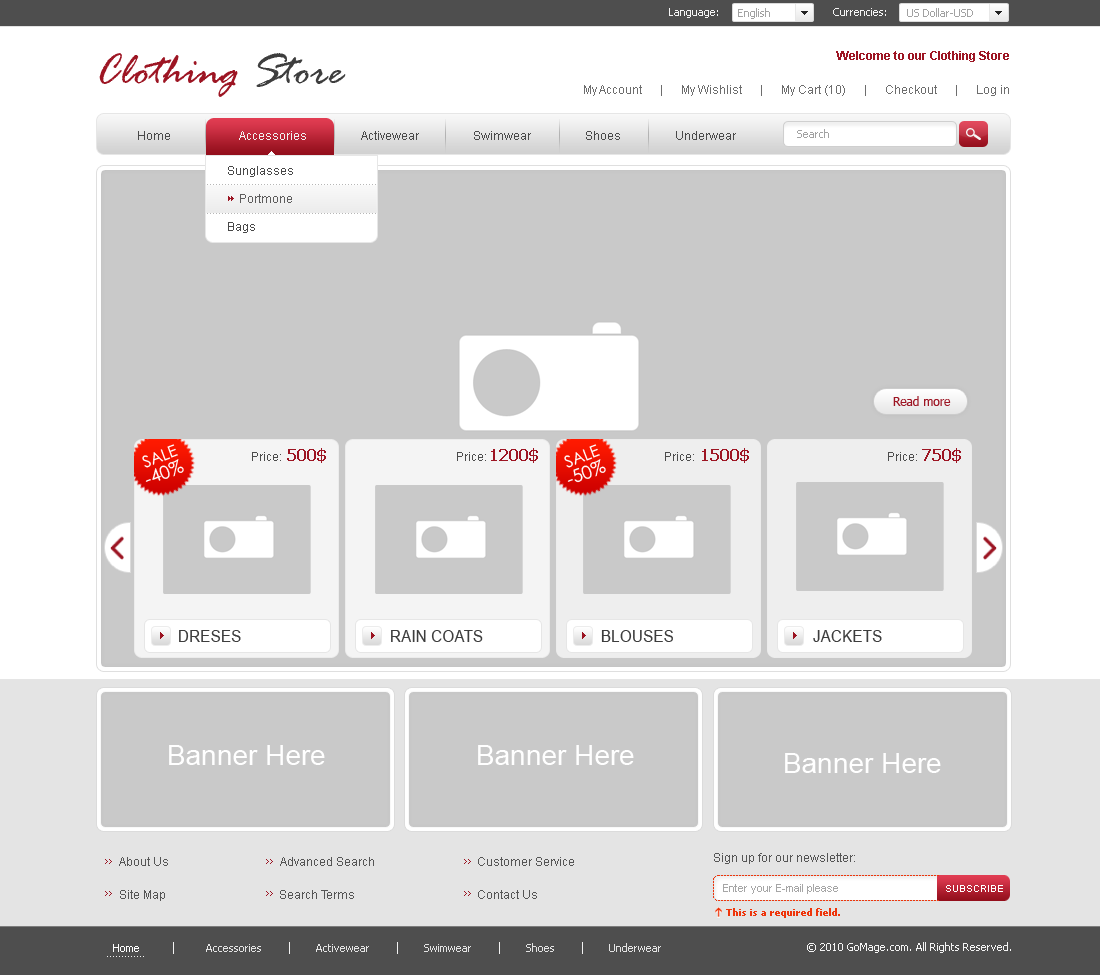
<style>
.page{position:relative;width:1100px;height:975px;background:#c9c9c9}
.page>*{position:absolute;margin:0}
.t1{font:11px "Tahoma";color:#f4f4f4}
.t2{font:11px "Tahoma";color:#a2a2a2}
.t3{font:47px "RageItalic";color:#9d1523}
.t4{font:47px "RageItalic";color:#3e3e3e}
.t5{font:12px "Arial-BoldMT";color:#9d1523}
.t6{font:12px "ArialMT";color:#6d6d6d}
.t7{font:12px "ArialMT";color:#4a4a4a}
.t8{font:12px "ArialMT";color:#f1f1f1}
.t9{font:12px/28px "ArialMT";color:#484848}
.t10{font:12px/28px "ArialMT";color:#5e5d5d}
.t11{font:12px "ArialMT";color:#b6b6b6}
.t12{font:12px "Tahoma";color:#9d1523}
.t13{font:16px "CenturyGothic";color:#ffffff}
.t14{font:16px "Tahoma-Bold";color:#9d1523}
.t15{font:18px "CenturyGothic";color:#ffffff}
.t16{font:12px "ArialMT";color:#4c4c4c}
.t17{font:17px "ArialMT";color:#3d3d3d;text-transform:uppercase;scale:0.91 1}
.t18{font:28px "ArialMT";color:#ffffff}
.t19{font:12px "ArialMT";color:#565656}
.t20{font:12px "ArialMT";color:#555555}
.t21{font:11px "ArialMT";color:#a6a6a6}
.t22{font:10px "ArialMT";color:#ffffff;text-transform:uppercase}
.t23{font:10px "Tahoma-Bold";color:#ee350b}
.t24{font:11px "Tahoma";color:#e3e3e3}
.t25{font:11px "Tahoma";color:#ffffff}
.t26{font:11px "ArialMT";color:#f2f2f2}
</style>
<div class="page">
<p class="t1" style="left:669px;top:8px;width:49px;height:10px">Language:</p>
<p class="t2" style="left:738px;top:8px;width:32px;height:11px">English</p>
<p class="t1" style="left:833px;top:8px;width:53px;height:8px">Currencies:</p>
<p class="t2" style="left:907px;top:8px;width:66px;height:9px">US Dollar-USD</p>
<p class="t3" style="left:99px;top:53px;width:247px;height:44px">Clothing <span class="t4">Store</span></p>
<p class="t5" style="left:836px;top:51px;width:173px;height:11px">Welcome to our Clothing Store</p>
<p class="t6" style="left:584px;top:85px;width:425px;height:11px">My Account      |      My Wishlist      |      My Cart (10)      |      Checkout      |      Log in</p>
<p class="t7" style="left:138px;top:131px;width:598px;height:9px">Home                     <span class="t8">  Accessories  </span>                Activewear                  Swimwear                  Shoes                  Underwear</p>
<p class="t2" style="left:797px;top:129px;width:32px;height:9px">Search</p>
<p class="t9" style="left:228px;top:166px;width:65px;height:67px">Sunglasses<br><span class="t10">    Portmone<br></span>Bags</p>
<p class="t11" style="left:207px;top:184px;width:169px;height:1px">.........................................................</p>
<p class="t11" style="left:207px;top:213px;width:169px;height:1px">.........................................................</p>
<p class="t12" style="left:893px;top:396px;width:58px;height:10px">Read more</p>
<p class="t13" style="left:142px;top:444px;width:36px;height:24px;rotate:-21deg">SALE</p>
<p class="t14" style="left:287px;top:448px;width:39px;height:15px">500$</p>
<p class="t14" style="left:491px;top:448px;width:47px;height:15px">1200$</p>
<p class="t13" style="left:564px;top:444px;width:36px;height:24px;rotate:-21deg">SALE</p>
<p class="t14" style="left:702px;top:448px;width:47px;height:15px">1500$</p>
<p class="t14" style="left:922px;top:448px;width:39px;height:15px">750$</p>
<p class="t15" style="left:145px;top:459px;width:39px;height:23px;rotate:-21deg">-40%</p>
<p class="t16" style="left:252px;top:452px;width:29px;height:9px">Price:</p>
<p class="t16" style="left:457px;top:452px;width:29px;height:9px">Price:</p>
<p class="t15" style="left:567px;top:459px;width:39px;height:24px;rotate:-21deg">-50%</p>
<p class="t16" style="left:665px;top:452px;width:29px;height:9px">Price:</p>
<p class="t16" style="left:888px;top:452px;width:29px;height:9px">Price:</p>
<p class="t17" style="left:179px;top:630px;width:62px;height:12px">Dreses</p>
<p class="t17" style="left:391px;top:630px;width:92px;height:12px">Rain Coats</p>
<p class="t17" style="left:601px;top:630px;width:72px;height:12px">Blouses</p>
<p class="t17" style="left:813px;top:630px;width:69px;height:12px">JAckets</p>
<p class="t18" style="left:169px;top:745px;width:156px;height:20px">Banner Here</p>
<p class="t18" style="left:478px;top:745px;width:156px;height:20px">Banner Here</p>
<p class="t18" style="left:785px;top:753px;width:156px;height:20px">Banner Here</p>
<p class="t19" style="left:119px;top:857px;width:49px;height:9px">About Us</p>
<p class="t20" style="left:280px;top:857px;width:94px;height:9px">Advanced Search</p>
<p class="t20" style="left:478px;top:857px;width:96px;height:9px">Customer Service</p>
<p class="t20" style="left:714px;top:853px;width:141px;height:11px">Sign up for our newsletter:</p>
<p class="t20" style="left:120px;top:890px;width:45px;height:11px">Site Map</p>
<p class="t20" style="left:280px;top:890px;width:74px;height:9px">Search Terms</p>
<p class="t20" style="left:478px;top:890px;width:59px;height:9px">Contact Us</p>
<p class="t21" style="left:723px;top:884px;width:115px;height:10px">Enter your E-mail please</p>
<p class="t22" style="left:946px;top:885px;width:57px;height:7px">Subscribe</p>
<p class="t23" style="left:726px;top:908px;width:114px;height:10px">This is a required field.</p>
<p class="t1" style="left:807px;top:942px;width:204px;height:11px">© 2010 GoMage.com. All Rights Reserved.</p>
<p class="t24" style="left:113px;top:943px;width:548px;height:9px"><span class="t25">Home </span>                     Accessories                  Activewear                  Swimwear                  Shoes                  Underwear</p>
<p class="t26" style="left:107px;top:956px;width:37px;height:1px">.............</p>
</div>
